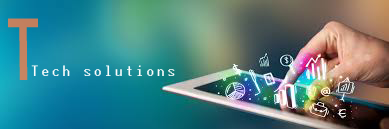
<style>
.page{position:relative;width:389px;height:129px}
.page>*{position:absolute;margin:0}
.t1{font:70.2px "Terminal";color:#c48260;scale:0.86 1}
.t2{font:14px "Terminal";color:#fdfdfd}
</style>
<div class="page">
<p class="t1" style="left:8px;top:18px;width:30px;height:62px">T</p>
<p class="t2" style="left:31px;top:65px;width:144px;height:11px">Tech solutions</p>
</div>
